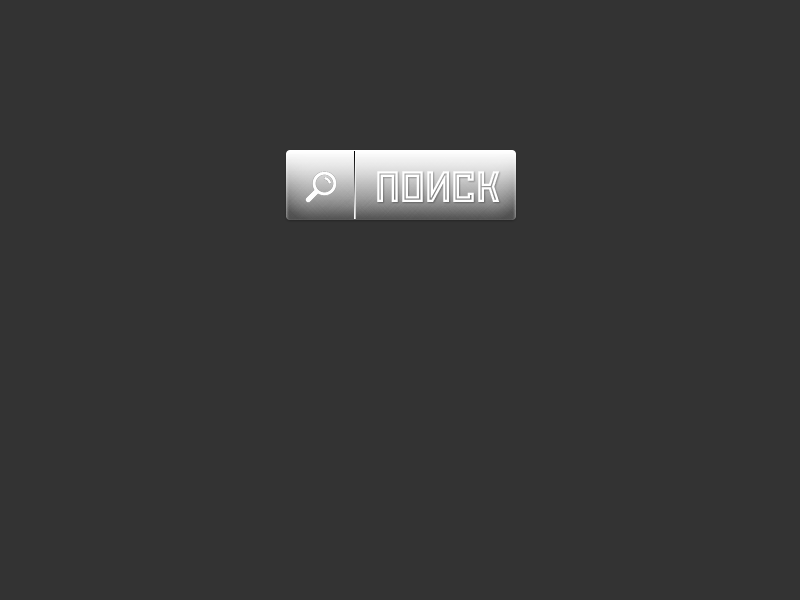
<style>
.page{position:relative;width:800px;height:600px;background:#333333}
.page>*{position:absolute;margin:0}
.t1{font:45px "SnowstormInline";color:#ffffff}
</style>
<div class="page">
<p class="t1" style="left:377px;top:171px;width:123px;height:31px">ПОИСК</p>
</div>
